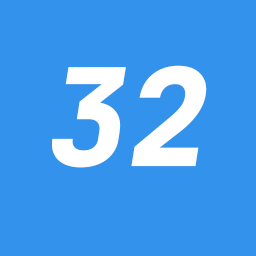
<style>
.page{position:relative;width:256px;height:256px;background:#3292ec}
.page>*{position:absolute;margin:0}
.t1{font:135.4px "JetBrainsMono-ExtraBoldItalic";color:#ffffff}
</style>
<div class="page">
<p class="t1" style="left:52px;top:65px;width:155px;height:103px">32</p>
</div>
